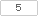
<style>
.page{position:relative;width:38px;height:16px;background:#ffffff}
.page>*{position:absolute;margin:0}
.t1{font:11px "morris9";color:#656565}
</style>
<div class="page">
<p class="t1" style="left:16px;top:4px;width:5px;height:7px">5</p>
</div>
